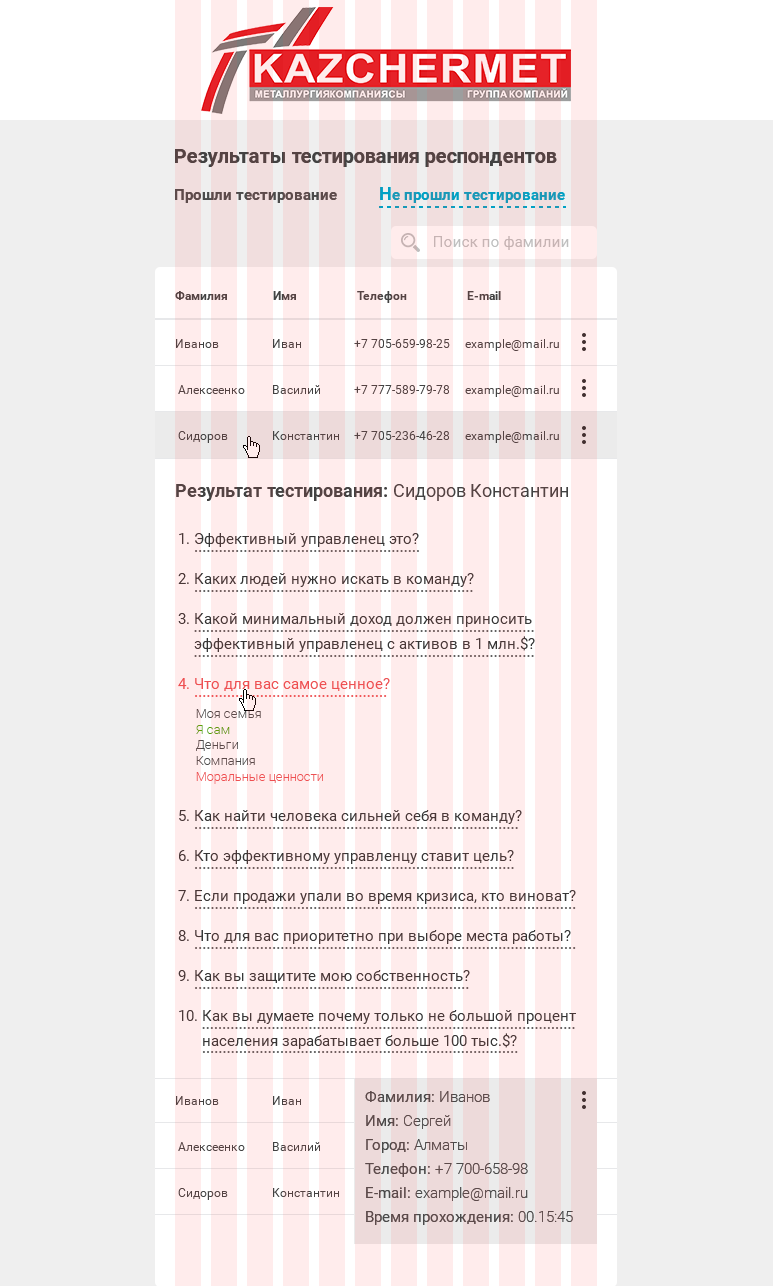
<style>
.page{position:relative;width:773px;height:1286px;background:#efefef}
.page>*{position:absolute;margin:0}
.t1{font:20px "Roboto-Bold";color:#424242}
.t2{font:15px "Roboto-Bold"}
.t3{font:18px "Roboto-Bold"}
.t4{font:15px "Roboto-Regular";color:#bfbfbf}
.t5{font:12px "Roboto-Bold";color:#424242}
.t6{font:12px "Roboto-Regular";color:#424242}
.t7{font:18px "Roboto-Bold";color:#424242}
.t8{font:18px "Roboto-Regular";color:#424242}
.t9{font:15px/40px "Roboto-Regular";color:#363636}
.t10{font:15px/25px "Roboto-Regular";color:#363636}
.t11{font:15px/40px "Roboto-Regular";color:#ed5153}
.t12{font:13px/29px "Roboto-Light";color:#4a4a4a}
.t13{font:13px "Roboto-Light";color:#55a500}
.t14{font:13px "Roboto-Light";color:#4a4a4a}
.t15{font:13px "Roboto-Light";color:#ed5153}
.t16{font:15px/24px "Roboto-Regular";color:#4a4a4a}
.t17{font:15px/24px "Roboto-Light";color:#4a4a4a}
</style>
<div class="page">
<p class="t1" style="left:175px;top:149px;width:382px;height:18px">Результаты тестирования респондентов</p>
<p class="t2" style="left:175px;top:187px;width:390px;height:16px">Прошли тестирование<span class="t3">       Н</span>е прошли тестирование</p>
<p class="t4" style="left:434px;top:236px;width:135px;height:14px">Поиск по фамилии</p>
<p class="t5" style="left:175px;top:291px;width:326px;height:12px">Фамилия               Имя                    Телефон                    E-mail</p>
<p class="t6" style="left:176px;top:339px;width:43px;height:9px">Иванов</p>
<p class="t6" style="left:273px;top:339px;width:28px;height:9px">Иван</p>
<p class="t6" style="left:354px;top:339px;width:96px;height:9px">+7 705-659-98-25</p>
<p class="t6" style="left:465px;top:339px;width:94px;height:12px">example@mail.ru</p>
<p class="t6" style="left:178px;top:385px;width:67px;height:9px">Алексеенко</p>
<p class="t6" style="left:273px;top:385px;width:47px;height:9px">Василий</p>
<p class="t6" style="left:354px;top:385px;width:95px;height:9px">+7 777-589-79-78</p>
<p class="t6" style="left:465px;top:385px;width:94px;height:12px">example@mail.ru</p>
<p class="t6" style="left:178px;top:431px;width:50px;height:12px">Сидоров</p>
<p class="t6" style="left:273px;top:431px;width:66px;height:9px">Константин</p>
<p class="t6" style="left:354px;top:431px;width:95px;height:9px">+7 705-236-46-28</p>
<p class="t6" style="left:465px;top:431px;width:94px;height:12px">example@mail.ru</p>
<p class="t7" style="left:176px;top:484px;width:392px;height:17px">Результат тестирования: <span class="t8">Сидоров Константин</span></p>
<p class="t9" style="left:178px;top:533px;width:398px;height:516px">1. Эффективный управленец это? <br>2. Каких людей нужно искать в команду? <br>3. Какой минимальный доход должен приносить<br>    <span class="t10">эффективный управленец с активов в 1 млн.$?<br></span><span class="t11">4. Что для вас самое ценное?<br></span><span class="t12">Моя семья<br></span><span class="t13">Я сам<br></span><span class="t14">Деньги<br>Компания<br></span><span class="t15">Моральные ценности<br></span>5. Как найти человека сильней себя в команду?<br>6. Кто эффективному управленцу ставит цель?<br>7. Если продажи упали во время кризиса, кто виноват?  <br>8. Что для вас приоритетно при выборе места работы? <br>9. Как вы защитите мою собственность?  <br>10. Как вы думаете почему только не большой процент<br><span class="t10">      населения зарабатывает больше 100 тыс.$?</span></p>
<p class="t6" style="left:176px;top:1096px;width:43px;height:9px">Иванов</p>
<p class="t6" style="left:273px;top:1096px;width:28px;height:9px">Иван</p>
<p class="t16" style="left:365px;top:1091px;width:208px;height:134px">Фамилия:<span class="t17"> Иванов<br></span>Имя:<span class="t17"> Сергей<br></span>Город: <span class="t17">Алматы<br></span>Телефон:<span class="t17"> +7 700-658-98<br></span>E-mail:<span class="t17"> example@mail.ru<br></span>Время прохождения:<span class="t17"> 00.15:45</span></p>
<p class="t6" style="left:178px;top:1142px;width:67px;height:9px">Алексеенко</p>
<p class="t6" style="left:273px;top:1142px;width:47px;height:9px">Василий</p>
<p class="t6" style="left:178px;top:1188px;width:50px;height:12px">Сидоров</p>
<p class="t6" style="left:273px;top:1188px;width:66px;height:9px">Константин</p>
</div>
